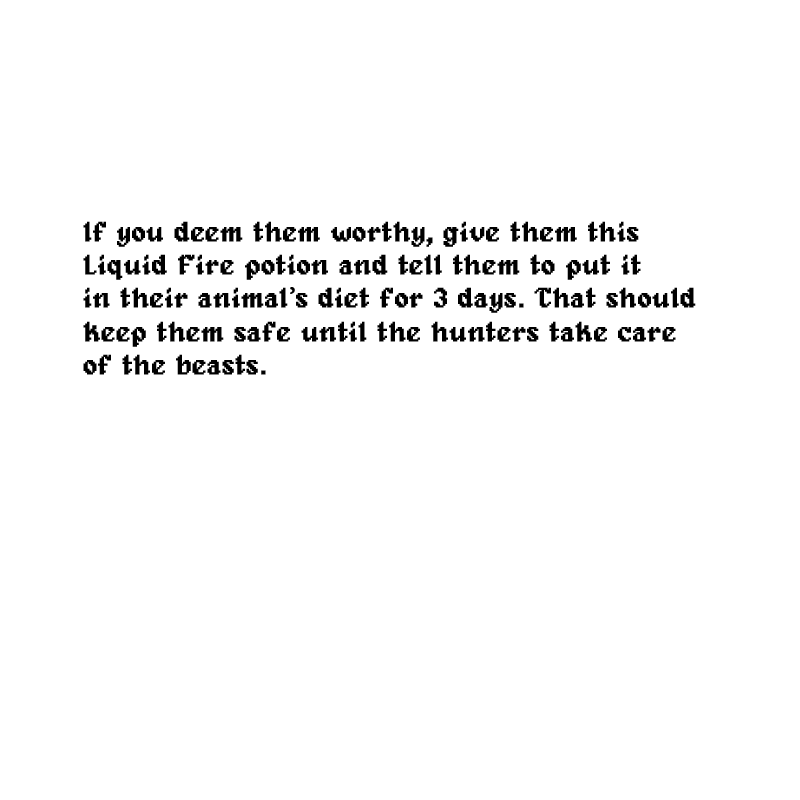
<style>
.page{position:relative;width:800px;height:800px;background:#ffffff}
.page>*{position:absolute;margin:0}
.t1{font:27.9px "Alagard";color:#000000;font-weight:bold}
.t2{font:27.9px "MinionPro-Regular";color:#000000;font-weight:bold}
</style>
<div class="page">
<p class="t1" style="left:83px;top:221px;width:613px;height:154px">If you deem them worthy, give them this<br>Liquid Fire potion and tell them to put it<br>in their animal<span class="t2">’</span>s diet for 3 days. That should<br>keep them safe until the hunters take care <br>of the beasts.</p>
</div>
